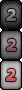
<style>
.page{position:relative;width:22px;height:90px}
.page>*{position:absolute;margin:0}
.t1{font:18px "FFADMatro"}
.t2{font:18px "FFADMatro";color:#885b5b}
</style>
<div class="page">
<p class="t1" style="left:6px;top:9px;width:10px;height:12px">2</p>
<p class="t2" style="left:6px;top:39px;width:11px;height:12px">2</p>
<p class="t1" style="left:6px;top:69px;width:10px;height:12px">2</p>
</div>
